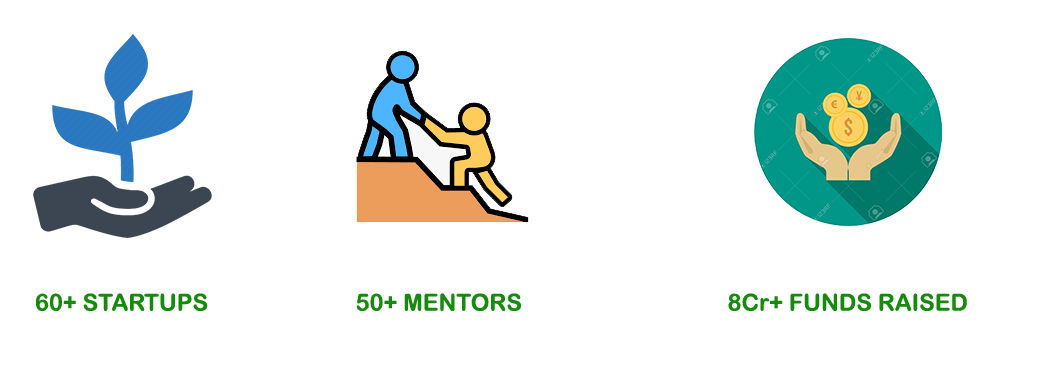
<style>
.page{position:relative;width:1056px;height:365px;background:#ffffff}
.page>*{position:absolute;margin:0}
.t1{font:23.5px "ArialRoundedMTBold";color:#158a0c}
</style>
<div class="page">
<p class="t1" style="left:36px;top:293px;width:172px;height:18px">60+ STARTUPS</p>
<p class="t1" style="left:356px;top:293px;width:165px;height:18px">50+ MENTORS</p>
<p class="t1" style="left:728px;top:293px;width:239px;height:18px">8Cr+ FUNDS RAISED</p>
</div>
